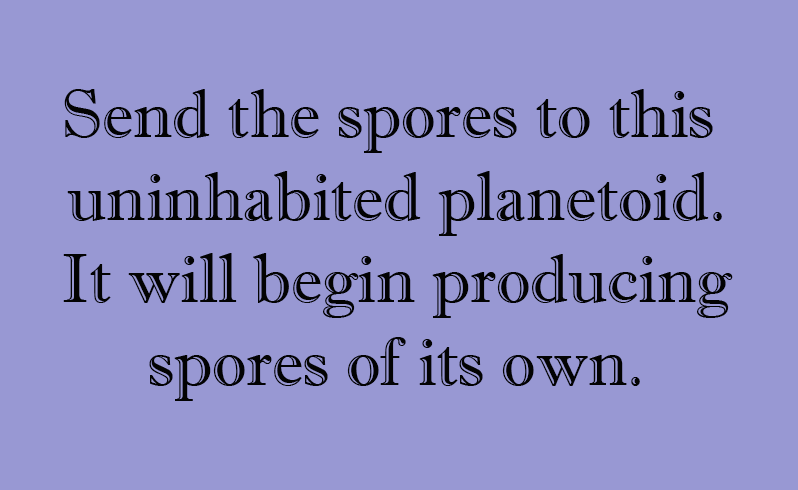
<style>
.page{position:relative;width:798px;height:490px;background:#9898d3}
.page>*{position:absolute;margin:0}
.t1{font:68.7px "ImprintMT-Shadow";color:#030303}
</style>
<div class="page">
<p class="t1" style="left:63px;top:89px;width:670px;height:312px;text-align:center">Send the spores to this <br>uninhabited planetoid.<br> It will begin producing <br>spores of its own.</p>
</div>
